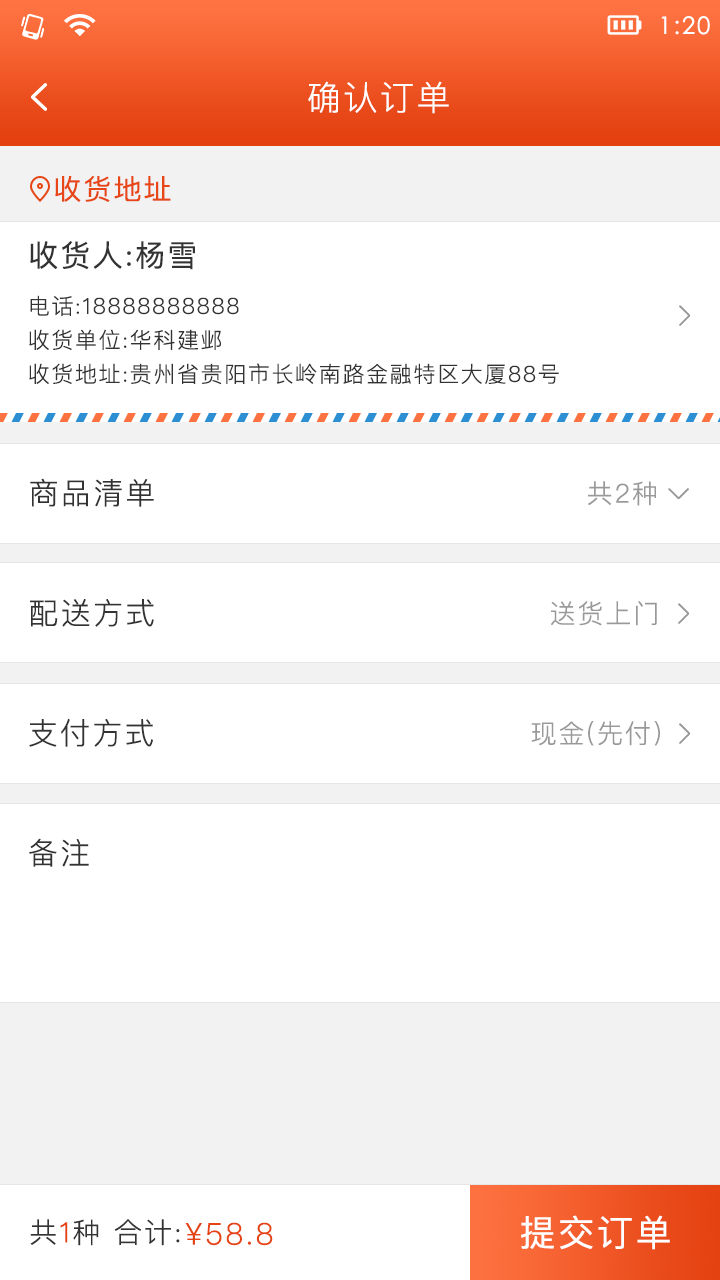
<style>
.page{position:relative;width:720px;height:1280px;background:#ffffff}
.page>*{position:absolute;margin:0}
.t1{font:24px "STXihei";letter-spacing:0.075em;color:#ffffff}
.t2{font:34px "PingFangSC-Light";letter-spacing:0.075em;color:#ffffff}
.t3{font:28px "PingFangSC-Regular";letter-spacing:0.075em;color:#e74616}
.t4{font:30px "PingFangSC-Regular";letter-spacing:0.075em;color:#333333}
.t5{font:22px/34px "PingFangSC-Light";letter-spacing:0.075em;color:#333333}
.t6{font:30px "PingFangSC-Light";letter-spacing:0.075em;color:#333333}
.t7{font:26px "PingFangSC-Light";letter-spacing:0.075em;color:#999999}
.t8{font:36px "PingFangSC-Regular";letter-spacing:0.075em;color:#ffffff}
.t9{font:28px "PingFangSC-Light";letter-spacing:0.075em;color:#333333}
.t10{font:28px "PingFangSC-Light";letter-spacing:0.075em;color:#e44111}
.t11{font:30px "PingFangSC-Light";letter-spacing:0.075em;color:#e54312}
</style>
<div class="page">
<p class="t1" style="left:661px;top:16px;width:49px;height:19px">1:20</p>
<p class="t2" style="left:308px;top:81px;width:141px;height:33px">确认订单</p>
<p class="t3" style="left:55px;top:175px;width:116px;height:27px">收货地址</p>
<p class="t4" style="left:30px;top:241px;width:165px;height:29px">收货人:杨雪</p>
<p class="t5" style="left:29px;top:295px;width:530px;height:90px">电话:18888888888<br>收货单位:华科建邺<br>收货地址:贵州省贵阳市长岭南路金融特区大厦88号</p>
<p class="t6" style="left:30px;top:478px;width:124px;height:29px">商品清单</p>
<p class="t7" style="left:588px;top:481px;width:68px;height:25px">共2种</p>
<p class="t6" style="left:30px;top:599px;width:124px;height:28px">配送方式</p>
<p class="t7" style="left:551px;top:601px;width:106px;height:25px">送货上门</p>
<p class="t6" style="left:29px;top:718px;width:124px;height:29px">支付方式</p>
<p class="t7" style="left:531px;top:721px;width:129px;height:25px">现金(先付)</p>
<p class="t6" style="left:29px;top:838px;width:60px;height:29px">备注</p>
<p class="t8" style="left:521px;top:1215px;width:149px;height:35px">提交订单</p>
<p class="t9" style="left:30px;top:1219px;width:150px;height:27px">共<span class="t10">1</span>种 合计:</p>
<p class="t11" style="left:185px;top:1222px;width:88px;height:24px">¥58.8</p>
</div>
